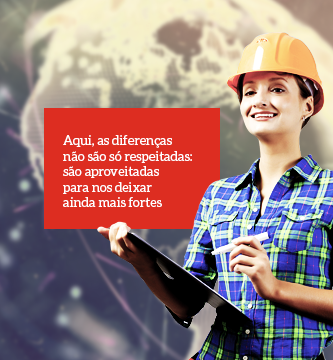
<style>
.page{position:relative;width:333px;height:360px}
.page>*{position:absolute;margin:0}
.t1{font:13px "Aleo-Regular";color:#ffffff}
</style>
<div class="page">
<p class="t1" style="left:63px;top:135px;width:129px;height:72px">Aqui, as diferenças<br>não são só respeitadas:<br>são aproveitadas<br>para nos deixar<br>ainda mais fortes</p>
</div>
